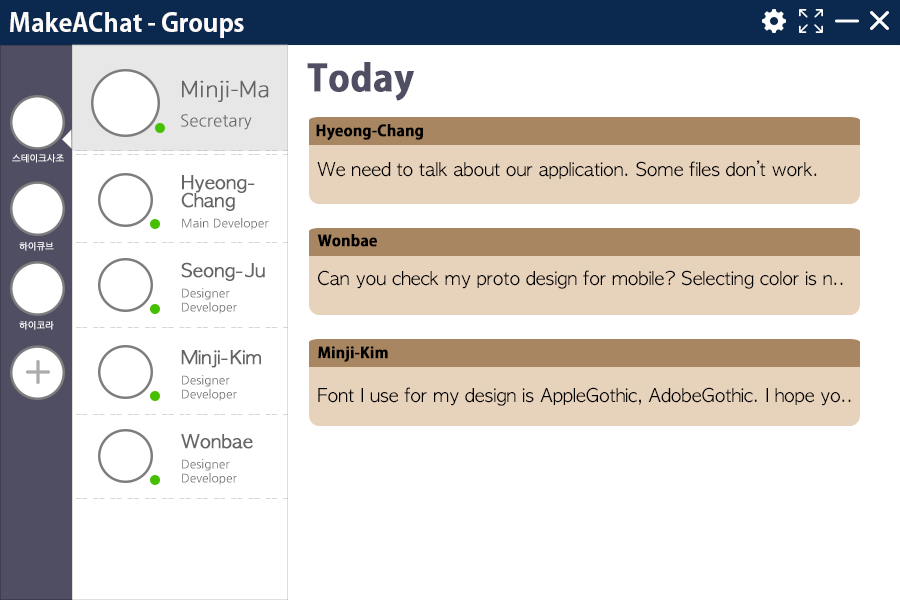
<style>
.page{position:relative;width:900px;height:600px;background:#ffffff}
.page>*{position:absolute;margin:0}
.t1{font:25px "AdobeGothicStd-Bold";color:#fcfafa}
.t2{font:36px "AdobeGothicStd-Bold";color:#504e63;font-weight:bold}
.t3{font:17px/18px "NanumGothic";color:#656565}
.t4{font:24px/18px "SukhumvitSet-Thin";color:#656565;font-weight:bold}
.t5{font:15px "AdobeGothicStd-Bold";color:#000000;font-weight:bold}
.t6{font:9px "NanumGothic";color:#ffffff;font-weight:bold}
.t7{font:18px "AppleGothic";color:#000000}
.t8{font:18px/18px "AppleGothic";color:#656565;font-weight:bold}
.t9{font:12px/8px "NanumGothic";color:#656565}
.t10{font:12px/12px "NanumGothic";color:#656565}
.t11{font:12px/14px "NanumGothic";color:#656565}
</style>
<div class="page">
<p class="t1" style="left:10px;top:12px;width:234px;height:26px">MakeAChat - Groups</p>
<p class="t2" style="left:307px;top:62px;width:107px;height:39px">Today</p>
<p class="t3" style="left:181px;top:80px;width:88px;height:50px"><span class="t4">Minji-Ma<br></span><br>Secretary</p>
<p class="t5" style="left:316px;top:124px;width:107px;height:16px">Hyeong-Chang</p>
<p class="t6" style="left:12px;top:154px;width:52px;height:9px">스테이크사조</p>
<p class="t7" style="left:317px;top:160px;width:500px;height:19px">We need to talk about our application. Some files don’t work.</p>
<p class="t8" style="left:181px;top:175px;width:88px;height:55px">Hyeong-<br>Chang<br><br><span class="t9">Main Develope</span><span class="t10">r</span></p>
<p class="t6" style="left:19px;top:242px;width:35px;height:9px">하이큐브</p>
<p class="t5" style="left:317px;top:234px;width:60px;height:13px">Wonbae</p>
<p class="t11" style="left:181px;top:262px;width:84px;height:52px"><span class="t8">Seong-Ju<br><br></span>Designer<br>Developer</p>
<p class="t7" style="left:318px;top:270px;width:525px;height:19px">Can you check my proto design for mobile? Selecting color is n..</p>
<p class="t6" style="left:19px;top:321px;width:35px;height:9px">하이코라</p>
<p class="t11" style="left:181px;top:350px;width:80px;height:51px"><span class="t8">Minji-Kim<br><br></span>Designer<br>Developer</p>
<p class="t5" style="left:318px;top:346px;width:70px;height:16px">Minji-Kim</p>
<p class="t7" style="left:318px;top:387px;width:533px;height:19px">Font I use for my design is AppleGothic, AdobeGothic. I hope yo..</p>
<p class="t11" style="left:181px;top:434px;width:72px;height:51px"><span class="t8">Wonbae<br><br></span>Designer<br>Developer</p>
</div>
